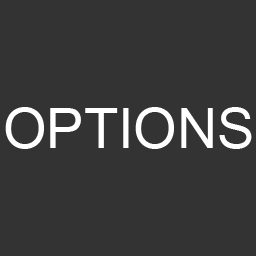
<style>
.page{position:relative;width:256px;height:256px;background:#333333}
.page>*{position:absolute;margin:0}
.t1{font:55.8px "ArialMT";color:#ffffff}
</style>
<div class="page">
<p class="t1" style="left:5px;top:107px;width:247px;height:42px">OPTIONS</p>
</div>
